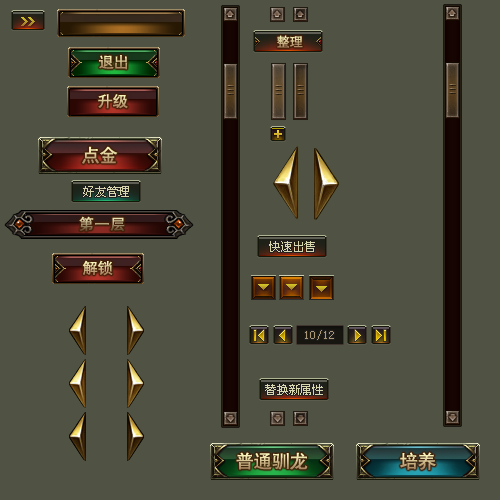
<style>
.page{position:relative;width:500px;height:500px;background:#505243}
.page>*{position:absolute;margin:0}
.t1{font:13px "-G-h-e-i-0-1-m"}
.t2{font:15px "-G-h-e-i-0-1-m"}
.t3{font:18px "-G-h-e-i-0-1-m"}
.t4{font:12px "SimSun";color:#d8d6af}
.t5{font:15px "-G-h-e-i-0-1-m";letter-spacing:0.05em}
.t6{font:12px "SimSun";color:#a99877}
</style>
<div class="page">
<p class="t1" style="left:277px;top:35px;width:26px;height:13px">整理</p>
<p class="t2" style="left:99px;top:55px;width:29px;height:15px">退出</p>
<p class="t2" style="left:98px;top:94px;width:30px;height:15px">升级</p>
<p class="t3" style="left:82px;top:146px;width:36px;height:18px">点金</p>
<p class="t4" style="left:83px;top:186px;width:46px;height:11px">好友管理</p>
<p class="t5" style="left:79px;top:216px;width:46px;height:16px">第一层</p>
<p class="t4" style="left:269px;top:241px;width:46px;height:11px">快速出售</p>
<p class="t2" style="left:82px;top:260px;width:31px;height:16px">解锁</p>
<p class="t6" style="left:305px;top:330px;width:29px;height:10px">10/12</p>
<p class="t4" style="left:265px;top:384px;width:58px;height:11px">替换新属性</p>
<p class="t3" style="left:236px;top:452px;width:72px;height:18px">普通驯龙</p>
<p class="t3" style="left:400px;top:452px;width:36px;height:18px">培养</p>
</div>
